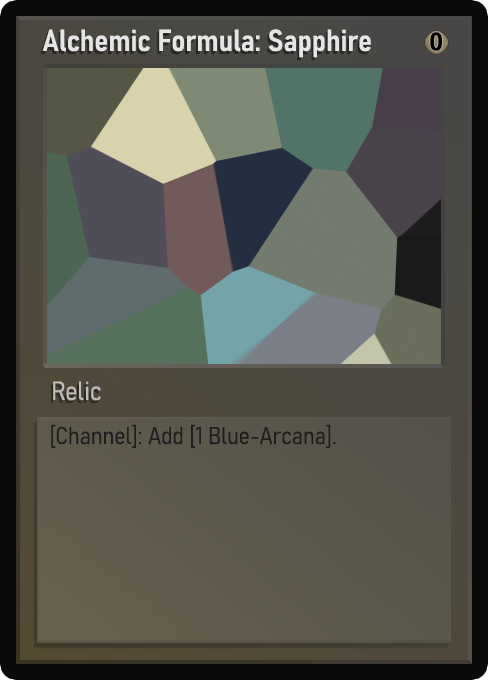
<style>
.page{position:relative;width:488px;height:680px}
.page>*{position:absolute;margin:0}
.t1{font:30px "Bahnschrift-SemiBoldSemiCondensed";color:#f2f2f2;font-weight:bold}
.t2{font:25px "WTRRoycroft";color:#000000;font-weight:bold;scale:1.09 1}
.t3{font:26px "Bahnschrift-LightSemiCondensed";color:#c8c8c8;font-weight:bold}
.t4{font:24px "Bahnschrift-LightSemiCondensed";color:#1e1e1e;font-weight:bold}
</style>
<div class="page">
<p class="t1" style="left:42px;top:29px;width:329px;height:29px;opacity:0.9">Alchemic Formula: Sapphire</p>
<p class="t2" style="left:430px;top:32px;width:12px;height:19px">0</p>
<p class="t3" style="left:53px;top:381px;width:48px;height:20px;opacity:0.9">Relic</p>
<p class="t4" style="left:51px;top:424px;width:285px;height:24px">[Channel]: Add [1 Blue-Arcana].</p>
</div>
